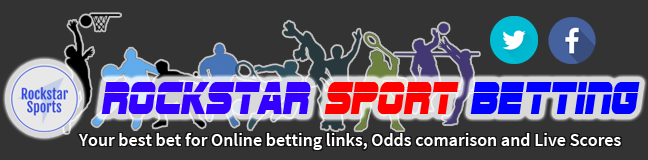
<style>
.page{position:relative;width:648px;height:160px;background:#333333}
.page>*{position:absolute;margin:0}
.t1{font:48px "SFSportsNight";color:#3300ff;scale:0.82 1}
.t2{font:48px "SFSportsNight";color:#ff0000;scale:0.82 1}
.t3{font:48px "SFSportsNight";color:#0000ff;scale:0.82 1}
.t4{font:18px "SourceSansPro-Semibold";color:#ffffff}
</style>
<div class="page">
<p class="t1" style="left:101px;top:82px;width:539px;height:32px">RockStar<span class="t2"> Sport </span><span class="t3">Betting</span></p>
<p class="t4" style="left:78px;top:133px;width:543px;height:17px">Your best bet for Online betting links, Odds comarison and Live Scores</p>
</div>
